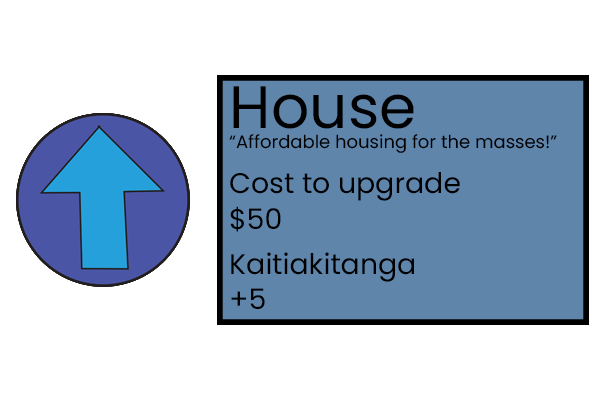
<style>
.page{position:relative;width:600px;height:400px;background:#ffffff}
.page>*{position:absolute;margin:0}
.t1{font:60px "Poppins-Regular";color:#000000}
.t2{font:18px "Poppins-Regular";color:#000000}
.t3{font:28.4px "Poppins-Regular";color:#000000}
</style>
<div class="page">
<p class="t1" style="left:233px;top:86px;width:181px;height:43px">House</p>
<p class="t1" style="left:233px;top:86px;width:181px;height:43px">House</p>
<p class="t1" style="left:233px;top:86px;width:181px;height:43px">House</p>
<p class="t1" style="left:233px;top:86px;width:181px;height:43px">House</p>
<p class="t1" style="left:233px;top:86px;width:181px;height:43px">House</p>
<p class="t1" style="left:233px;top:86px;width:181px;height:43px">House</p>
<p class="t1" style="left:233px;top:86px;width:181px;height:43px">House</p>
<p class="t2" style="left:229px;top:134px;width:328px;height:19px">“Affordable housing for the masses!”</p>
<p class="t2" style="left:229px;top:134px;width:328px;height:19px">“Affordable housing for the masses!”</p>
<p class="t2" style="left:229px;top:134px;width:328px;height:19px">“Affordable housing for the masses!”</p>
<p class="t2" style="left:229px;top:134px;width:328px;height:19px">“Affordable housing for the masses!”</p>
<p class="t2" style="left:229px;top:134px;width:328px;height:19px">“Affordable housing for the masses!”</p>
<p class="t2" style="left:229px;top:134px;width:328px;height:19px">“Affordable housing for the masses!”</p>
<p class="t2" style="left:229px;top:134px;width:328px;height:19px">“Affordable housing for the masses!”</p>
<p class="t3" style="left:230px;top:172px;width:230px;height:29px">Cost to upgrade</p>
<p class="t3" style="left:230px;top:172px;width:230px;height:29px">Cost to upgrade</p>
<p class="t3" style="left:230px;top:172px;width:230px;height:29px">Cost to upgrade</p>
<p class="t3" style="left:230px;top:172px;width:230px;height:29px">Cost to upgrade</p>
<p class="t3" style="left:230px;top:172px;width:230px;height:29px">Cost to upgrade</p>
<p class="t3" style="left:230px;top:172px;width:230px;height:29px">Cost to upgrade</p>
<p class="t3" style="left:230px;top:172px;width:230px;height:29px">Cost to upgrade</p>
<p class="t3" style="left:230px;top:206px;width:51px;height:26px">$50</p>
<p class="t3" style="left:230px;top:206px;width:51px;height:26px">$50</p>
<p class="t3" style="left:230px;top:206px;width:51px;height:26px">$50</p>
<p class="t3" style="left:230px;top:206px;width:51px;height:26px">$50</p>
<p class="t3" style="left:230px;top:206px;width:51px;height:26px">$50</p>
<p class="t3" style="left:230px;top:206px;width:51px;height:26px">$50</p>
<p class="t3" style="left:230px;top:206px;width:51px;height:26px">$50</p>
<p class="t3" style="left:231px;top:252px;width:183px;height:30px">Kaitiakitanga</p>
<p class="t3" style="left:231px;top:252px;width:183px;height:30px">Kaitiakitanga</p>
<p class="t3" style="left:231px;top:252px;width:183px;height:30px">Kaitiakitanga</p>
<p class="t3" style="left:231px;top:252px;width:183px;height:30px">Kaitiakitanga</p>
<p class="t3" style="left:231px;top:252px;width:183px;height:30px">Kaitiakitanga</p>
<p class="t3" style="left:231px;top:252px;width:183px;height:30px">Kaitiakitanga</p>
<p class="t3" style="left:231px;top:252px;width:183px;height:30px">Kaitiakitanga</p>
<p class="t3" style="left:231px;top:288px;width:34px;height:21px">+5</p>
<p class="t3" style="left:231px;top:288px;width:34px;height:21px">+5</p>
<p class="t3" style="left:231px;top:288px;width:34px;height:21px">+5</p>
<p class="t3" style="left:231px;top:288px;width:34px;height:21px">+5</p>
<p class="t3" style="left:231px;top:288px;width:34px;height:21px">+5</p>
<p class="t3" style="left:231px;top:288px;width:34px;height:21px">+5</p>
<p class="t3" style="left:231px;top:288px;width:34px;height:21px">+5</p>
</div>
